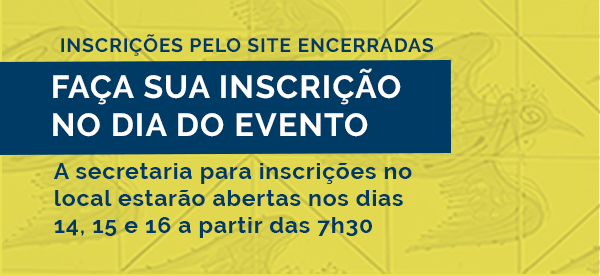
<style>
.page{position:relative;width:600px;height:276px;background:#003b65}
.page>*{position:absolute;margin:0}
.t1{font:19.6px "Raleway-Bold";letter-spacing:0.04em;color:#003b65;text-transform:uppercase}
.t2{font:32px "Raleway-Bold";letter-spacing:0.04em;color:#ffffff;text-transform:uppercase}
.t3{font:22.7px "Raleway-Bold";letter-spacing:0.04em;color:#003b65}
</style>
<div class="page">
<p class="t1" style="left:61px;top:34px;width:372px;height:22px">inscrições pelo site encerradas</p>
<p class="t2" style="left:53px;top:68px;width:348px;height:69px">faça sua inscrição <br>no dia do evento</p>
<p class="t3" style="left:53px;top:163px;width:359px;height:75px">A secretaria para inscrições no local estarão abertas nos dias 14, 15 e 16 a partir das 7h30</p>
</div>
